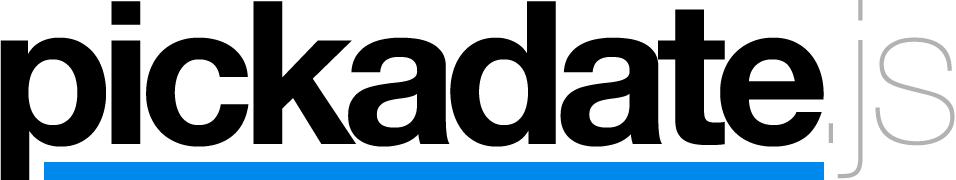
<style>
.page{position:relative;width:956px;height:180px;background:#ffffff}
.page>*{position:absolute;margin:0}
.t1{font:200px "HelveticaNeue-Bold";letter-spacing:-0.05em;color:#000000}
.t2{font:200px "HelveticaNeue-UltraLight";color:#b2b2b2}
</style>
<div class="page">
<p class="t1" style="left:0px;top:1px;width:824px;height:180px">pickadate</p>
<p class="t2" style="left:828px;top:0px;width:127px;height:179px">.js</p>
</div>
